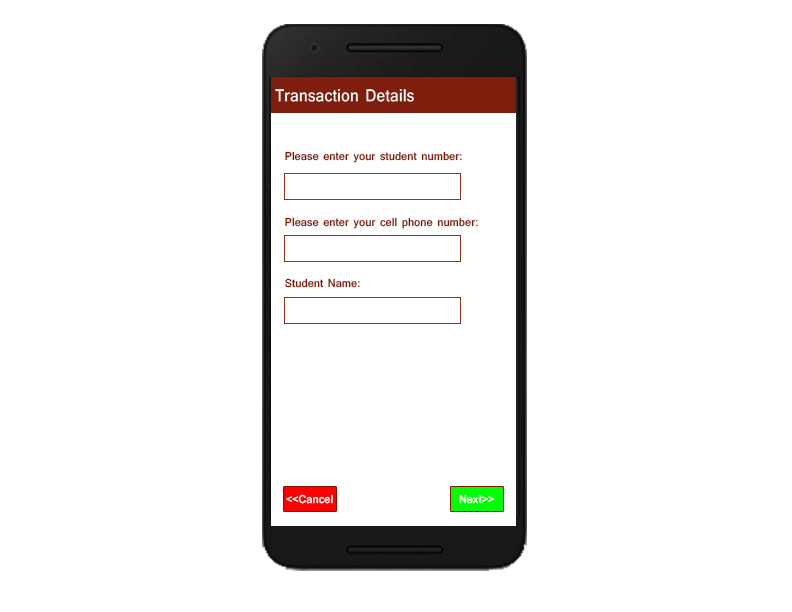
<style>
.page{position:relative;width:792px;height:612px;background:#ffffff}
.page>*{position:absolute;margin:0}
.t1{font:12px "Shruti-Bold";letter-spacing:0.01em;color:#841503;scale:0.95 1}
.t2{font:12px "Shruti-Bold";letter-spacing:0.01em;color:#fffcfb;scale:0.95 1}
</style>
<div class="page">
<p class="t1" style="left:285px;top:151px;width:177px;height:12px">Please enter your student number:</p>
<p class="t1" style="left:285px;top:217px;width:193px;height:12px">Please enter your cell phone number:</p>
<p class="t1" style="left:285px;top:278px;width:75px;height:10px">Student Name:</p>
<p class="t2" style="left:286px;top:494px;width:47px;height:10px">&lt;&lt;Cancel</p>
<p class="t2" style="left:459px;top:494px;width:35px;height:10px">Next&gt;&gt;</p>
</div>
